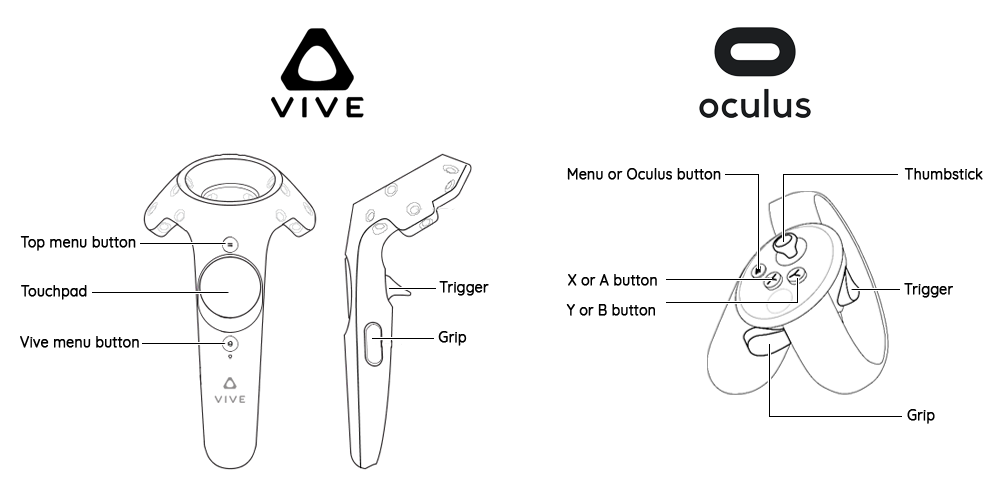
<style>
.page{position:relative;width:1000px;height:486px;background:#ffffff}
.page>*{position:absolute;margin:0}
.t1{font:14px "Quicksand-Regular";color:#000000;font-weight:bold}
.t2{font:14.1px "Quicksand-Regular";color:#000000;font-weight:bold}
</style>
<div class="page">
<p class="t1" style="left:567px;top:168px;width:154px;height:12px">Menu or Oculus button</p>
<p class="t1" style="left:904px;top:168px;width:79px;height:12px">Thumbstick</p>
<p class="t1" style="left:20px;top:236px;width:116px;height:15px">Top menu button</p>
<p class="t2" style="left:439px;top:281px;width:50px;height:15px">Trigger</p>
<p class="t1" style="left:568px;top:274px;width:89px;height:12px">X or A button</p>
<p class="t1" style="left:21px;top:285px;width:66px;height:15px">Touchpad</p>
<p class="t1" style="left:904px;top:283px;width:49px;height:15px">Trigger</p>
<p class="t1" style="left:566px;top:304px;width:89px;height:12px">Y or B button</p>
<p class="t1" style="left:20px;top:336px;width:119px;height:12px">Vive menu button</p>
<p class="t2" style="left:438px;top:331px;width:29px;height:15px">Grip</p>
<p class="t1" style="left:907px;top:409px;width:28px;height:15px">Grip</p>
</div>
